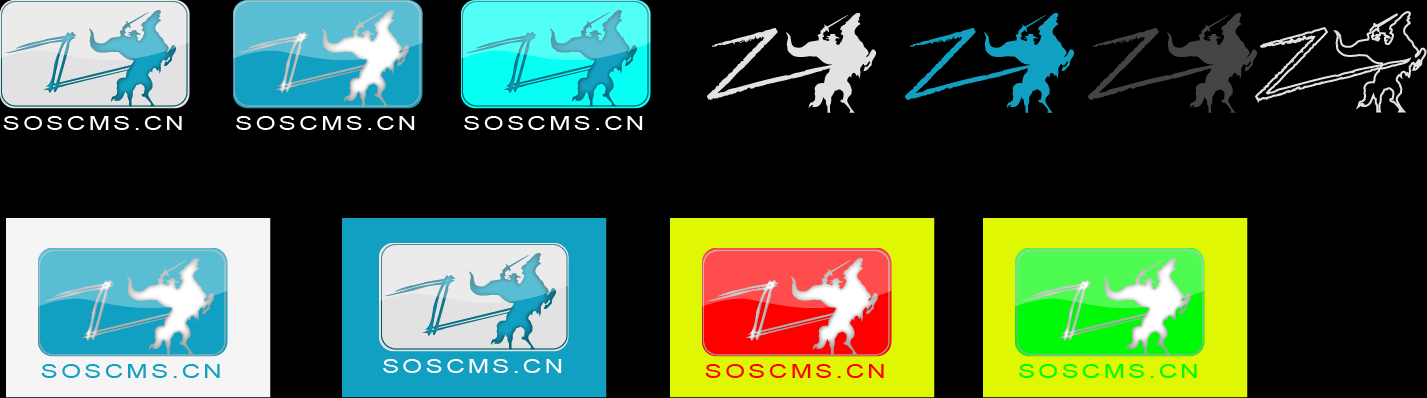
<style>
.page{position:relative;width:1427px;height:398px;background:#000000}
.page>*{position:absolute;margin:0}
.t1{font:18.7px "ARDS1";letter-spacing:0.1em;color:#ffffff;scale:1.41 1}
.t2{font:18.7px "ARDS1";letter-spacing:0.1em;color:#11a0c1;scale:1.41 1}
.t3{font:18.7px "ARDS1";letter-spacing:0.1em;color:#ff0000;scale:1.41 1}
.t4{font:18.7px "ARDS1";letter-spacing:0.1em;color:#00f906;scale:1.41 1}
</style>
<div class="page">
<p class="t1" style="left:3px;top:116px;width:179px;height:14px">SOSCMS.CN</p>
<p class="t1" style="left:236px;top:116px;width:179px;height:14px">SOSCMS.CN</p>
<p class="t1" style="left:464px;top:116px;width:179px;height:14px">SOSCMS.CN</p>
<p class="t2" style="left:41px;top:364px;width:179px;height:14px">SOSCMS.CN</p>
<p class="t1" style="left:383px;top:359px;width:179px;height:14px">SOSCMS.CN</p>
<p class="t3" style="left:705px;top:364px;width:179px;height:14px">SOSCMS.CN</p>
<p class="t4" style="left:1019px;top:364px;width:178px;height:14px">SOSCMS.CN</p>
</div>
